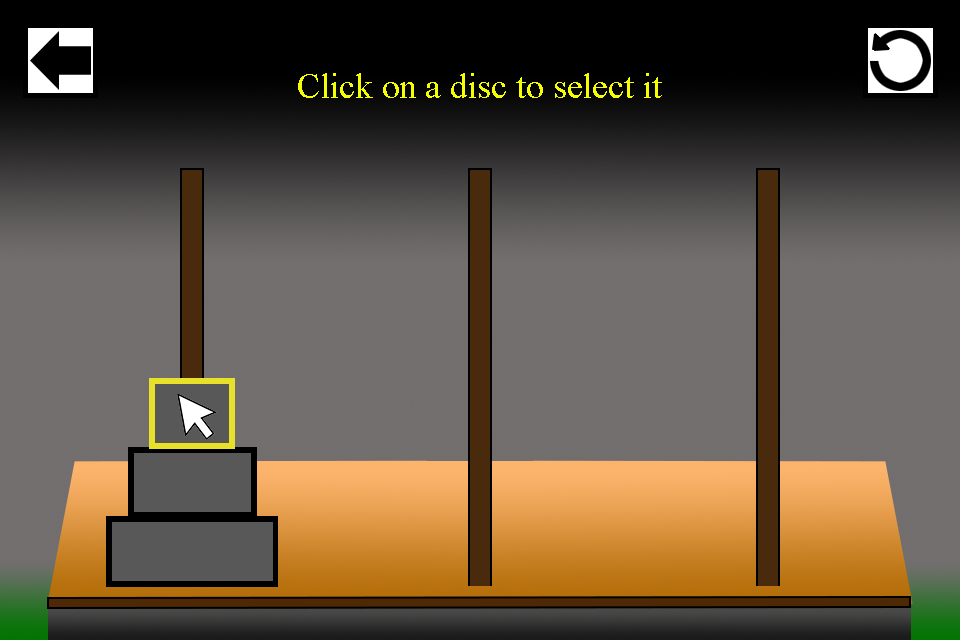
<style>
.page{position:relative;width:960px;height:640px}
.page>*{position:absolute;margin:0}
.t1{font:36px "TimesNewRomanPSMT";color:#f6ff00}
</style>
<div class="page">
<p class="t1" style="left:298px;top:73px;width:364px;height:25px">Click on a disc to select it</p>
</div>
